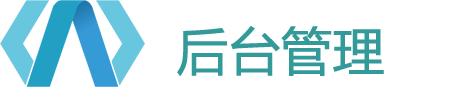
<style>
.page{position:relative;width:468px;height:87px;background:#ffffff}
.page>*{position:absolute;margin:0}
.t1{font:50.7px "MicrosoftYaHei";color:#339999;font-weight:bold}
</style>
<div class="page">
<p class="t1" style="left:177px;top:26px;width:207px;height:50px">后台管理</p>
</div>
